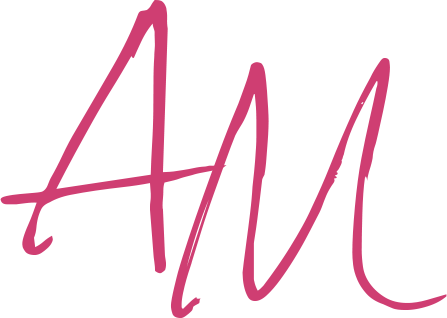
<style>
.page{position:relative;width:447px;height:318px;background:#ffffff}
.page>*{position:absolute;margin:0}
.t1{font:278.8px "DexteraTrial";color:#cf3e72;scale:1.41 1}
.t2{font:279.3px "DexteraTrial";color:#cf3e72;scale:1.15 1}
</style>
<div class="page">
<p class="t1" style="left:0px;top:0px;width:227px;height:274px">A</p>
<p class="t2" style="left:170px;top:58px;width:277px;height:260px">M</p>
</div>
